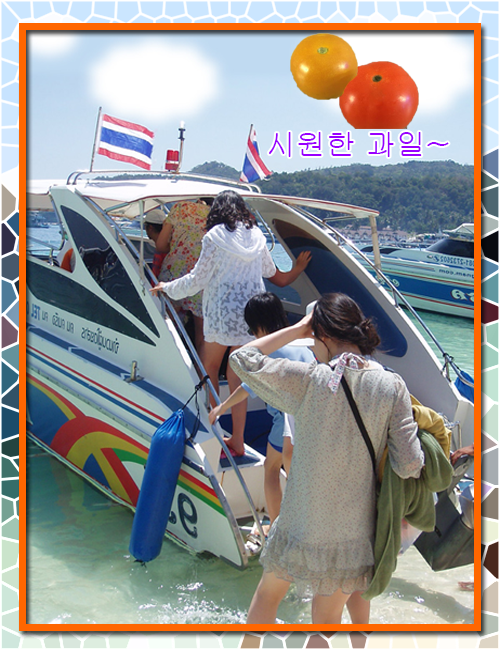
<style>
.page{position:relative;width:500px;height:650px}
.page>*{position:absolute;margin:0}
.t1{font:30px "Gulim";color:#9900ff}
</style>
<div class="page">
<p class="t1" style="left:269px;top:132px;width:180px;height:25px">시원한 과일~</p>
</div>
